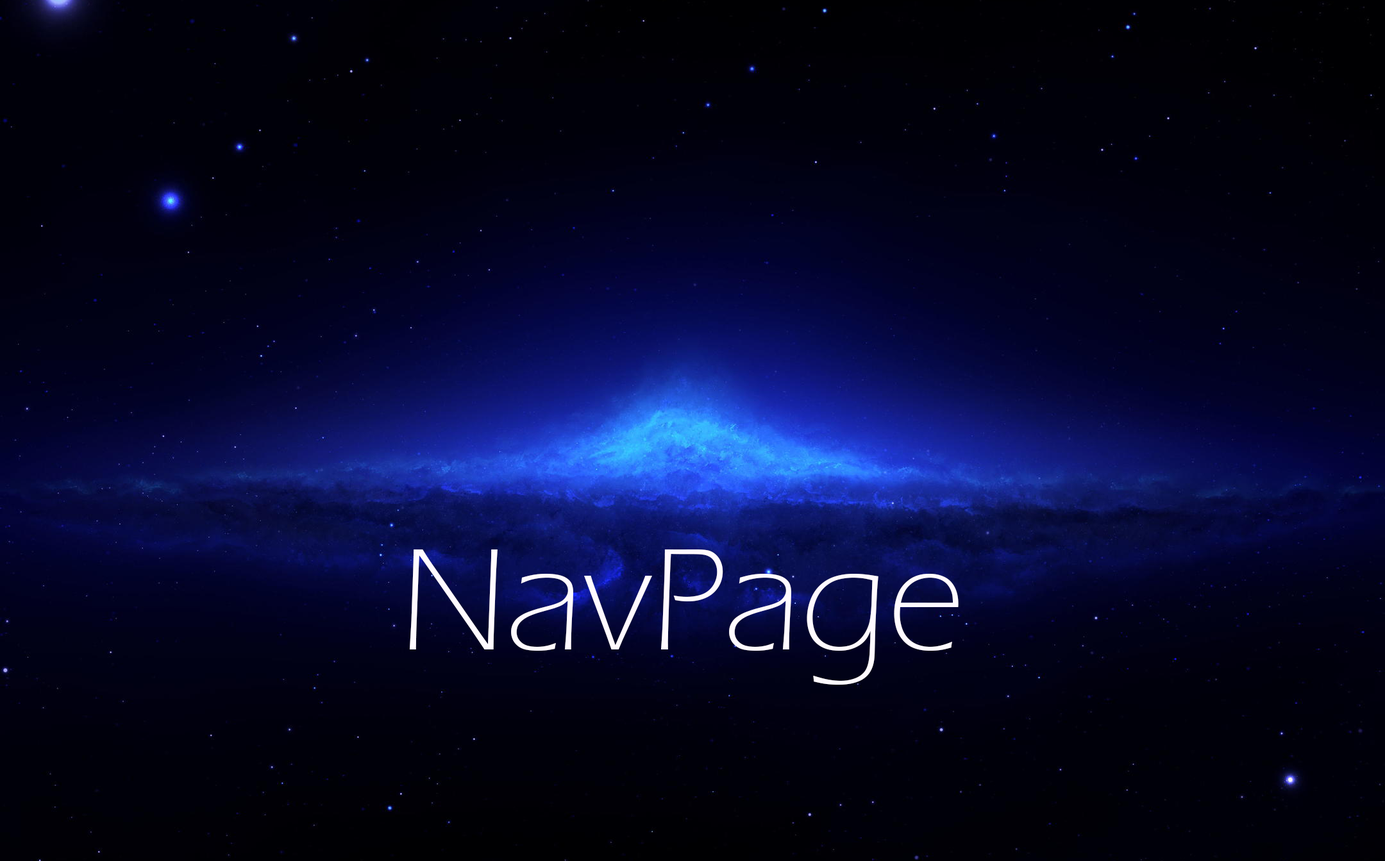
<style>
.page{position:relative;width:1385px;height:861px}
.page>*{position:absolute;margin:0}
.t1{font:150px "ErasITC-Light";color:#fffaff}
</style>
<div class="page">
<p class="t1" style="left:409px;top:549px;width:550px;height:136px">NavPage</p>
</div>
